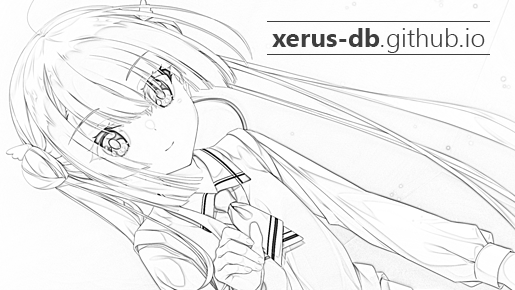
<style>
.page{position:relative;width:515px;height:290px}
.page>*{position:absolute;margin:0}
.t1{font:26px "SegoeUI-Semilight";color:#3e3e3e}
.t2{font:26px "SegoeUI-Bold";color:#3e3e3e}
.t3{font:26px "SegoeUI-SemilightItalic";color:#3e3e3e}
</style>
<div class="page">
<p class="t1" style="left:272px;top:28px;width:213px;height:25px"><span class="t2">xerus-db</span><span class="t3">.</span>github.io</p>
</div>
